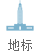
<style>
.page{position:relative;width:40px;height:55px;background:#ffffff}
.page>*{position:absolute;margin:0}
.t1{font:22.5px "SimSun";letter-spacing:0.05em;color:#666666;font-variant:small-caps}
</style>
<div class="page">
<p class="t1" style="left:8px;top:39px;width:24px;height:12px">地标</p>
</div>
